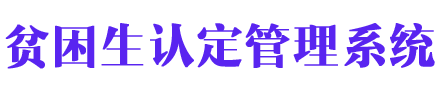
<style>
.page{position:relative;width:440px;height:90px;background:#ffffff}
.page>*{position:absolute;margin:0}
.t1{font:47px "RTWSShangYaDemo-Regular";color:#5924f0;font-weight:bold}
</style>
<div class="page">
<p class="t1" style="left:5px;top:23px;width:430px;height:46px">贫困生认定管理系统</p>
</div>
